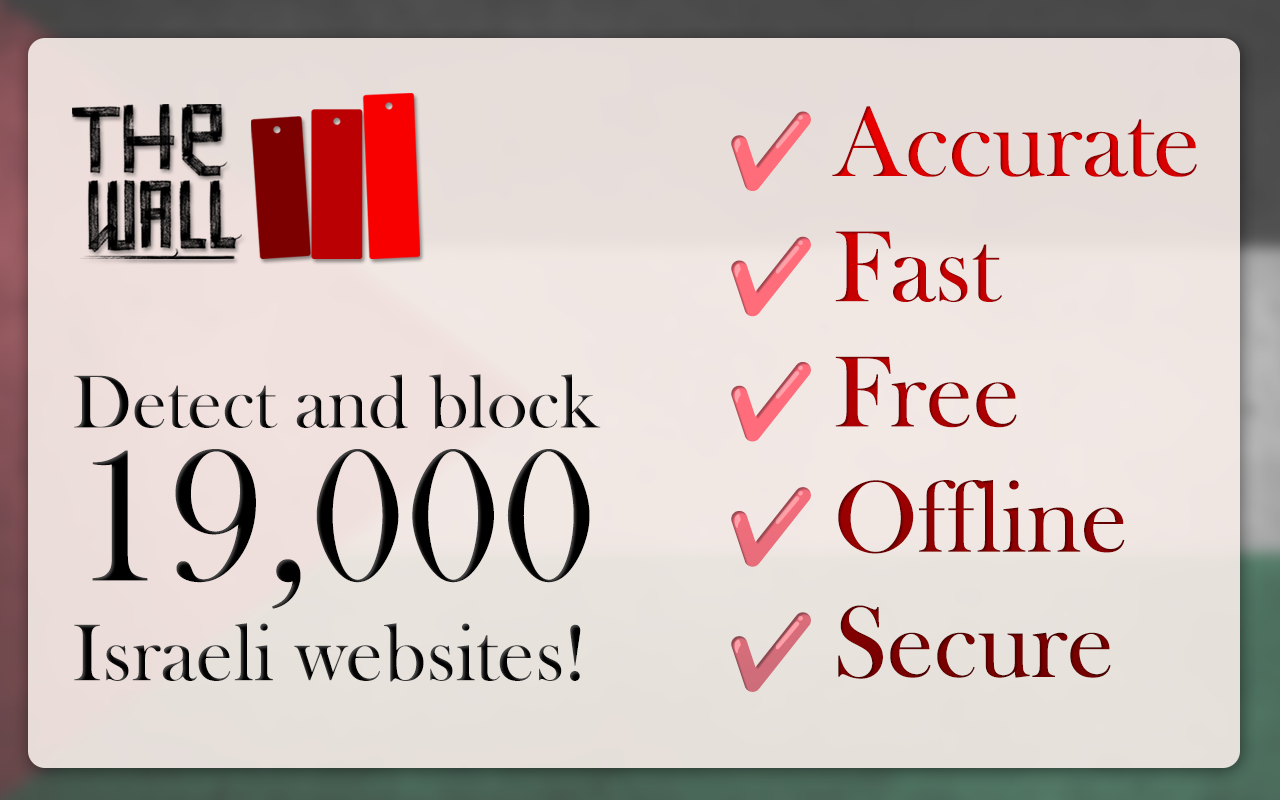
<style>
.page{position:relative;width:1280px;height:800px}
.page>*{position:absolute;margin:0}
.t1{font:104.3px "BaskOldFace"}
.t2{font:72.2px "NotoColorEmoji-SVG"}
.t3{font:83.3px "BaskOldFace";color:#000000}
.t4{font:77.8px "BaskOldFace";color:#000000}
.t5{font:194.4px/152.8px "BaskOldFace";color:#000000}
</style>
<div class="page">
<p class="t1" style="left:731px;top:106px;width:466px;height:586px"><span class="t2">✔️ </span>Accurate<br><span class="t2">✔️ </span>Fast<br><span class="t2">✔️ </span>Free<br><span class="t2">✔️ </span>Offline<br><span class="t2">✔️ </span>Secure</p>
<p class="t3" style="left:74px;top:374px;width:527px;height:308px"><span class="t4">Detect and block <br></span><span class="t5">19,000 <br></span>Israeli websites!</p>
</div>
